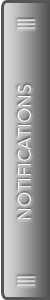
<style>
.page{position:relative;width:50px;height:300px}
.page>*{position:absolute;margin:0}
.t1{font:18px "AvenirNext-Regular";color:#ffffff}
</style>
<div class="page">
<p class="t1" style="left:17px;top:19px;width:19px;height:267px;rotate:-90deg">|||            NOTIFICATIONS            |||</p>
</div>
